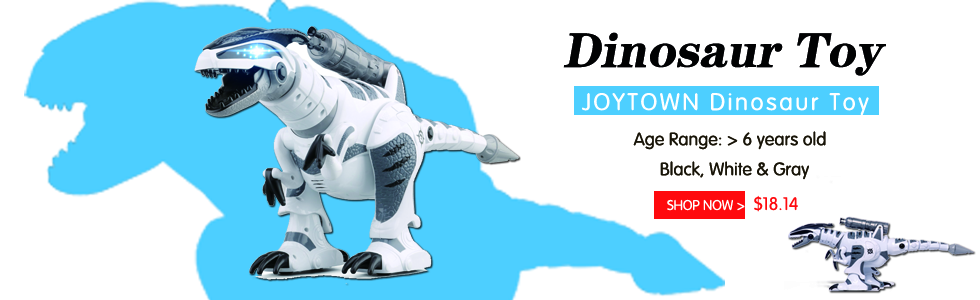
<style>
.page{position:relative;width:980px;height:300px;background:#ffffff}
.page>*{position:absolute;margin:0}
.t1{font:48.9px "FZCHYJW--GB1-0";color:#010203;font-style:italic}
.t2{font:24px "FZY3JW--GB1-0";letter-spacing:0.1em;color:#ffffff}
.t3{font:18px/30px "FZY3JW--GB1-0";color:#171409}
.t4{font:18px "FZY3JW--GB1-0";color:#ff0a0e}
.t5{font:24px "FZY3JW--GB1-0";color:#ff0a0e}
.t6{font:14px "FZY3JW--GB1-0";color:#ffffff}
</style>
<div class="page">
<p class="t1" style="left:563px;top:32px;width:323px;height:44px">Dinosaur Toy</p>
<p class="t2" style="left:582px;top:93px;width:287px;height:23px">JOYTOWN Dinosaur Toy</p>
<p class="t3" style="left:633px;top:131px;width:193px;height:49px;text-align:center">Age Range: &gt; 6 years old<br>  Black, White &amp; Gray</p>
<p class="t4" style="left:754px;top:195px;width:44px;height:17px"><span class="t5"> </span>$18.14</p>
<p class="t6" style="left:667px;top:199px;width:78px;height:12px">SHOP NOW &gt;</p>
</div>
